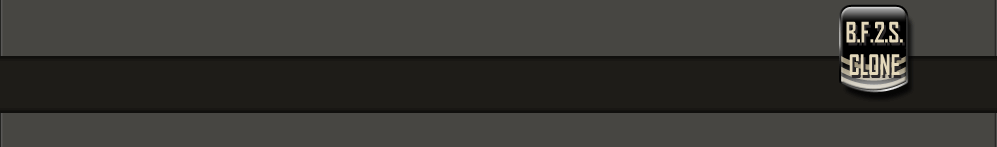
<style>
.page{position:relative;width:997px;height:147px;background:#474642}
.page>*{position:absolute;margin:0}
.t1{font:27.1px "AgencyFB-Bold";color:#e5d9bb;scale:0.86 1}
</style>
<div class="page">
<p class="t1" style="left:846px;top:21px;width:57px;height:54px;text-align:center">B.F.2.S.<br>CLONE</p>
</div>
